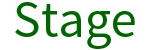
<style>
.page{position:relative;width:150px;height:50px;background:#ffffff}
.page>*{position:absolute;margin:0}
.t1{font:52px "SourceSansPro-Regular";color:#006400}
</style>
<div class="page">
<p class="t1" style="left:15px;top:2px;width:120px;height:47px">Stage</p>
</div>
